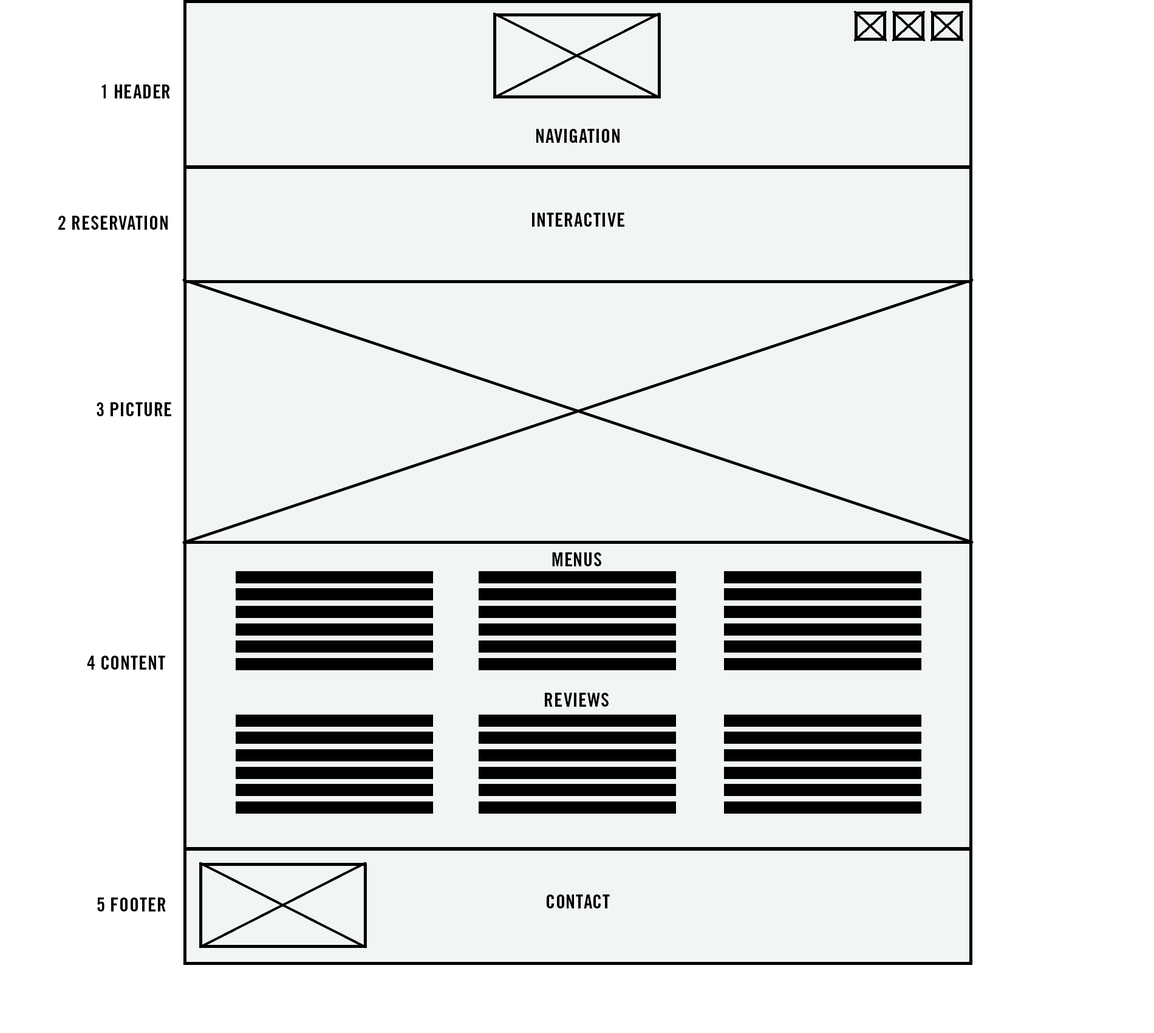
<style>
.page{position:relative;width:1154px;height:1033px;background:#f1f5f3}
.page>*{position:absolute;margin:0}
.t1{font:19.4px "TradeGothic-BoldCondTwenty";letter-spacing:0.02em;color:#000000;text-transform:uppercase}
</style>
<div class="page">
<p class="t1" style="left:101px;top:84px;width:69px;height:14px">1 HEader</p>
<p class="t1" style="left:537px;top:129px;width:83px;height:14px">navigation</p>
<p class="t1" style="left:58px;top:216px;width:110px;height:14px">2 reservation</p>
<p class="t1" style="left:532px;top:213px;width:93px;height:14px">interactive</p>
<p class="t1" style="left:97px;top:402px;width:74px;height:14px">3 picture</p>
<p class="t1" style="left:552px;top:552px;width:50px;height:14px">menus</p>
<p class="t1" style="left:87px;top:656px;width:78px;height:14px">4 content</p>
<p class="t1" style="left:545px;top:693px;width:64px;height:14px">reviews</p>
<p class="t1" style="left:97px;top:897px;width:69px;height:14px">5 footer</p>
<p class="t1" style="left:547px;top:894px;width:63px;height:14px">contact</p>
</div>
